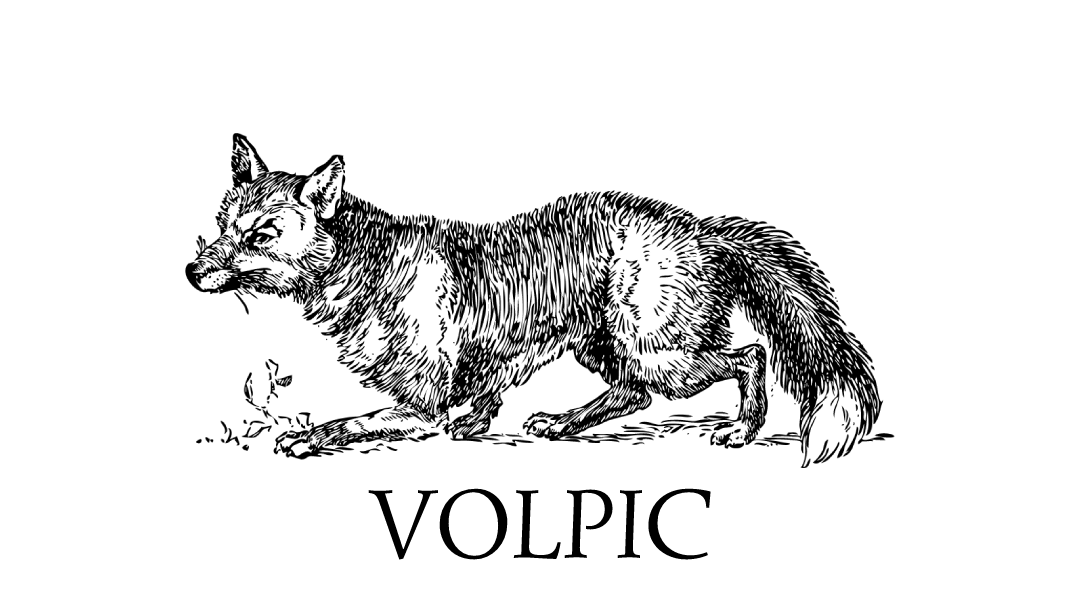
<style>
.page{position:relative;width:1080px;height:602px;background:#ffffff}
.page>*{position:absolute;margin:0}
.t1{font:100px "Simonetta-Regular";color:#000000}
</style>
<div class="page">
<p class="t1" style="left:368px;top:488px;width:343px;height:72px">VOLPIC</p>
</div>
